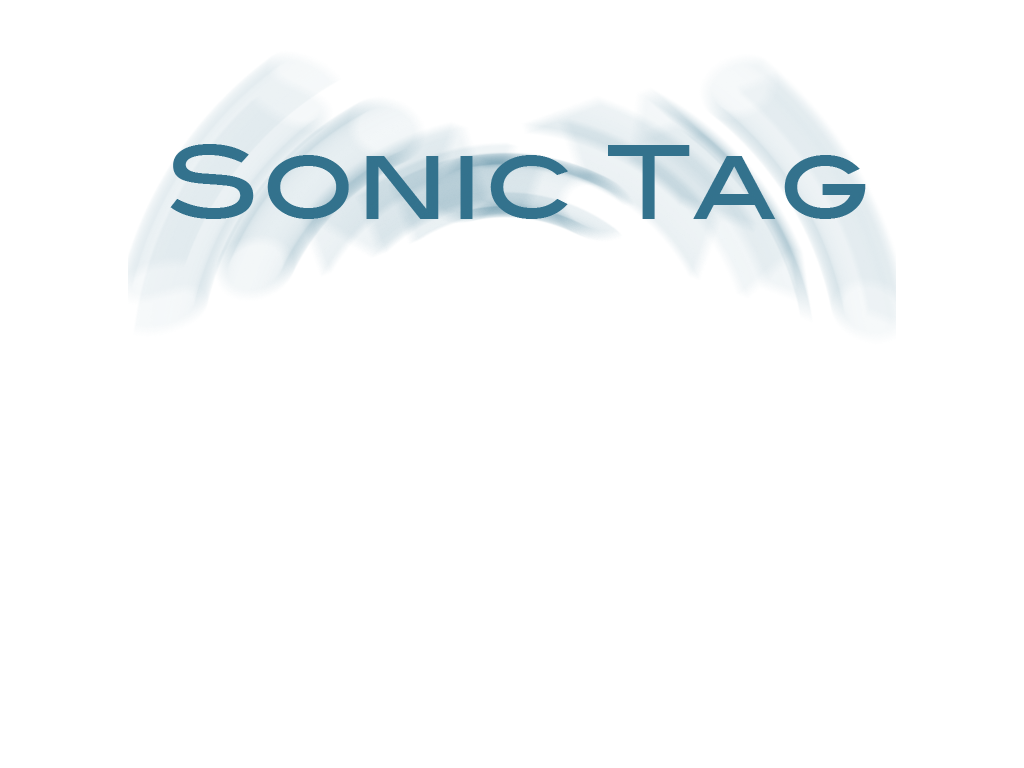
<style>
.page{position:relative;width:1024px;height:768px;background:#ffffff}
.page>*{position:absolute;margin:0}
.t1{font:100px "BlairMdITCTTMedium";letter-spacing:0.01em;color:#33728d}
</style>
<div class="page">
<p class="t1" style="left:170px;top:144px;width:696px;height:75px">Sonic Tag</p>
</div>
